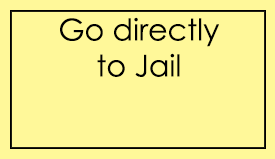
<style>
.page{position:relative;width:275px;height:159px;background:#fff899}
.page>*{position:absolute;margin:0}
.t1{font:30px "CenturyGothic";color:#000000}
</style>
<div class="page">
<p class="t1" style="left:60px;top:17px;width:159px;height:60px;text-align:center">Go directly <br>to Jail</p>
</div>
